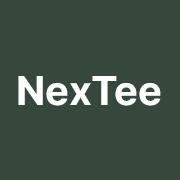
<style>
.page{position:relative;width:180px;height:180px;background:#35483b}
.page>*{position:absolute;margin:0}
.t1{font:40px "Inter-Bold";color:#ffffff}
</style>
<div class="page">
<p class="t1" style="left:18px;top:76px;width:143px;height:30px">NexTee</p>
</div>
